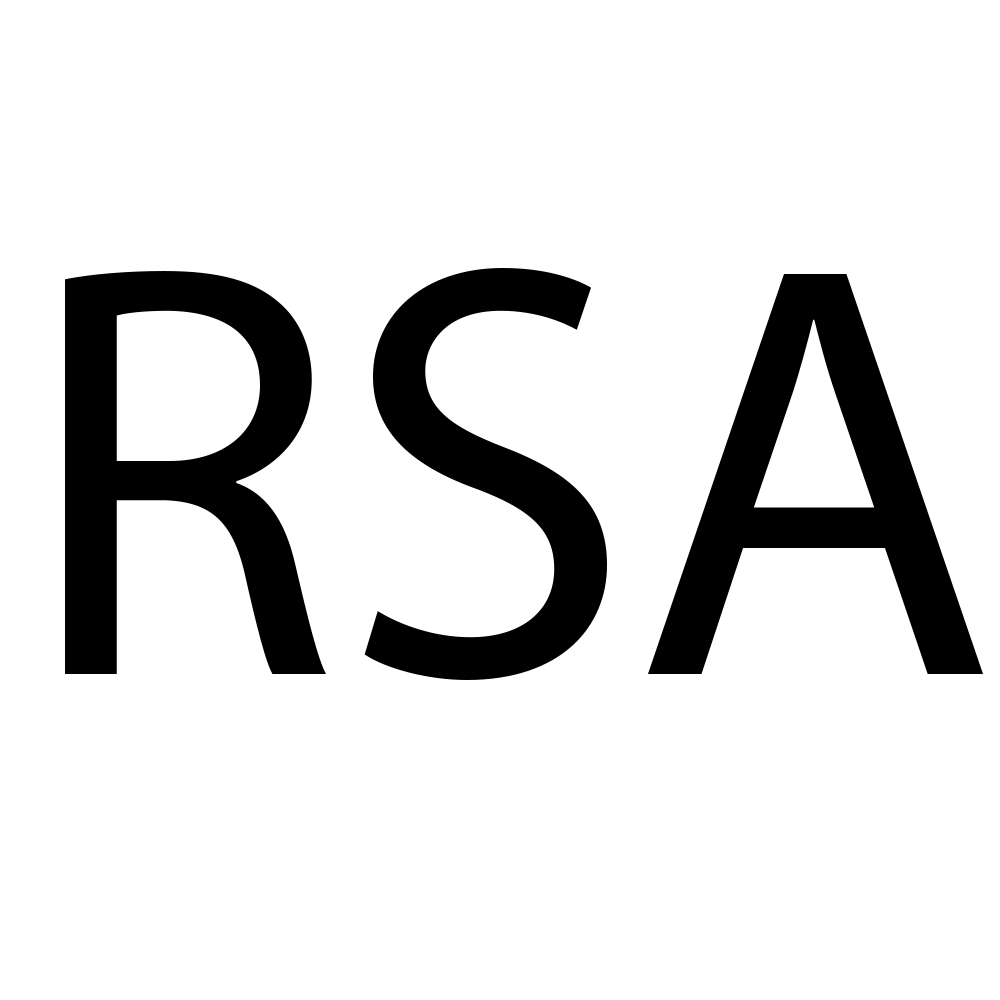
<style>
.page{position:relative;width:1000px;height:1000px;background:#ffffff}
.page>*{position:absolute;margin:0}
.t1{font:594.1px "MyriadPro-Regular";color:#000000}
</style>
<div class="page">
<p class="t1" style="left:65px;top:268px;width:918px;height:412px">RSA</p>
</div>
